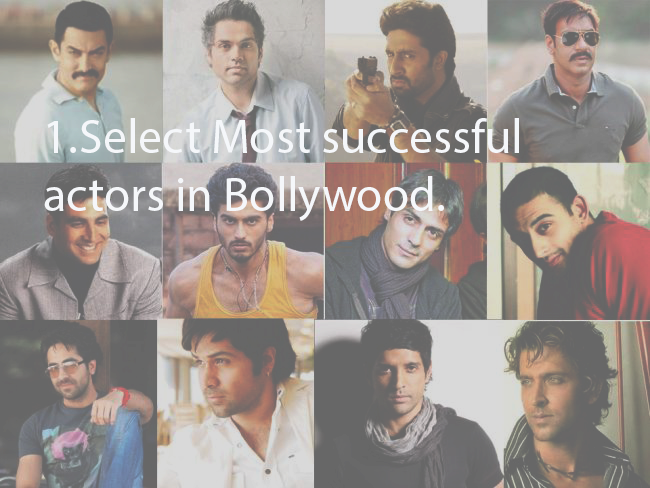
<style>
.page{position:relative;width:650px;height:488px}
.page>*{position:absolute;margin:0}
.t1{font:48px "MyriadPro-Regular";color:#f5f7fa}
</style>
<div class="page">
<p class="t1" style="left:44px;top:118px;width:475px;height:103px">1. Select Most successful actors in Bollywood.</p>
</div>
